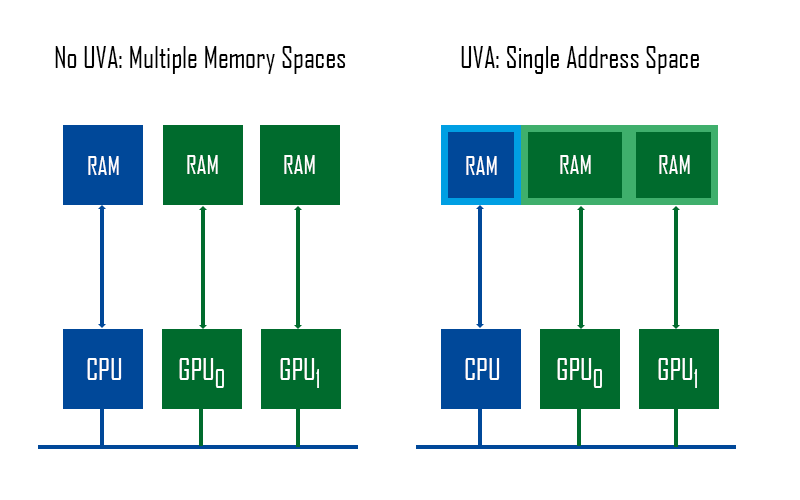
<style>
.page{position:relative;width:800px;height:500px;background:#ffffff}
.page>*{position:absolute;margin:0}
.t1{font:28.7px "AgencyFB-Reg";color:#000000}
.t2{font:25px "AgencyFB-Reg";color:#ffffff}
.t3{font:28.7px "AgencyFB-Reg";color:#ffffff}
</style>
<div class="page">
<p class="t1" style="left:55px;top:46px;width:291px;height:28px">No UVA: Multiple Memory Spaces</p>
<p class="t1" style="left:461px;top:46px;width:238px;height:28px">UVA: Single Address Space</p>
<p class="t2" style="left:88px;top:156px;width:31px;height:19px">RAM</p>
<p class="t2" style="left:187px;top:155px;width:31px;height:19px">RAM</p>
<p class="t2" style="left:284px;top:155px;width:31px;height:19px">RAM</p>
<p class="t2" style="left:466px;top:156px;width:31px;height:19px">RAM</p>
<p class="t2" style="left:560px;top:155px;width:31px;height:19px">RAM</p>
<p class="t2" style="left:659px;top:155px;width:31px;height:19px">RAM</p>
<p class="t3" style="left:87px;top:358px;width:35px;height:22px">CPU</p>
<p class="t3" style="left:179px;top:358px;width:45px;height:30px">GPU<span class="t2">0</span></p>
<p class="t3" style="left:280px;top:358px;width:39px;height:30px">GPU<span class="t2">1</span></p>
<p class="t3" style="left:465px;top:358px;width:35px;height:22px">CPU</p>
<p class="t3" style="left:557px;top:358px;width:45px;height:30px">GPU<span class="t2">0</span></p>
<p class="t3" style="left:658px;top:358px;width:39px;height:30px">GPU<span class="t2">1</span></p>
</div>
